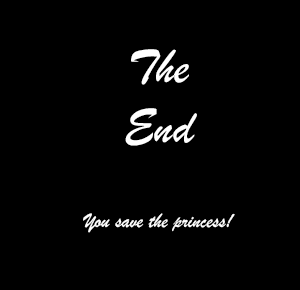
<style>
.page{position:relative;width:300px;height:290px;background:#000000}
.page>*{position:absolute;margin:0}
.t1{font:20.8px "BrushScriptMT";color:#ffffff}
.t2{font:12px "BrushScriptMT";color:#ffffff}
</style>
<div class="page">
<p class="t1" style="left:83px;top:49px;width:152px;height:184px;text-align:center"><span class="t2">The<br>End<br><br></span>You save the princess!</p>
</div>
